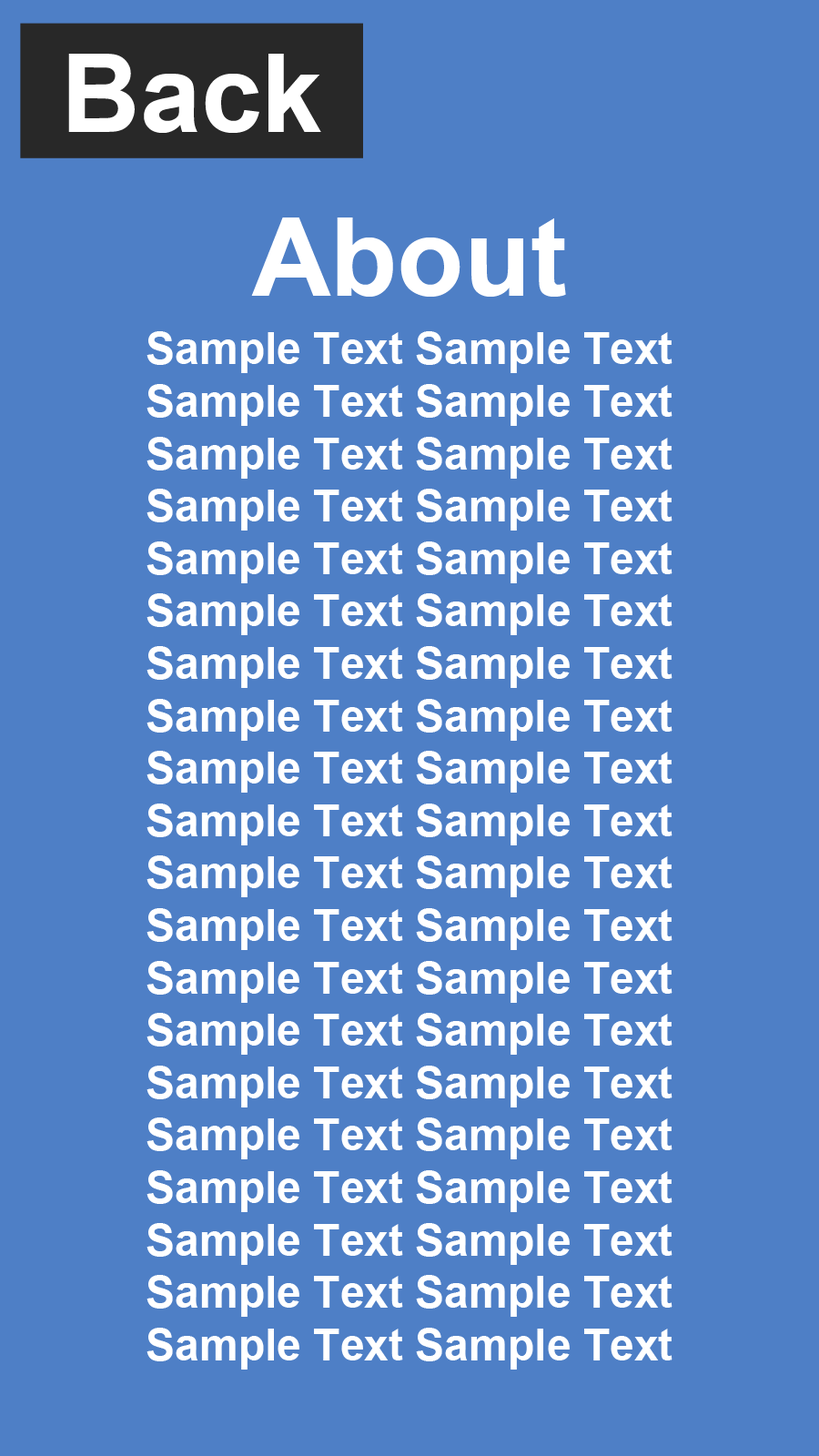
<style>
.page{position:relative;width:819px;height:1456px;background:#4e7fc6}
.page>*{position:absolute;margin:0}
.t1{font:109.2px "Arial-BoldMT";color:#ffffff}
.t2{font:43.7px "Arial-BoldMT";color:#ffffff}
</style>
<div class="page">
<p class="t1" style="left:68px;top:54px;width:253px;height:79px">Back</p>
<p class="t1" style="left:251px;top:217px;width:315px;height:80px">About</p>
<p class="t2" style="left:147px;top:331px;width:525px;height:1039px;text-align:center">Sample Text Sample Text Sample Text Sample Text Sample Text Sample Text Sample Text Sample Text Sample Text Sample Text Sample Text Sample Text Sample Text Sample Text Sample Text Sample Text Sample Text Sample Text Sample Text Sample Text Sample Text Sample Text Sample Text Sample Text Sample Text Sample Text Sample Text Sample Text Sample Text Sample Text Sample Text Sample Text Sample Text Sample Text Sample Text Sample Text Sample Text Sample Text Sample Text Sample Text</p>
</div>
